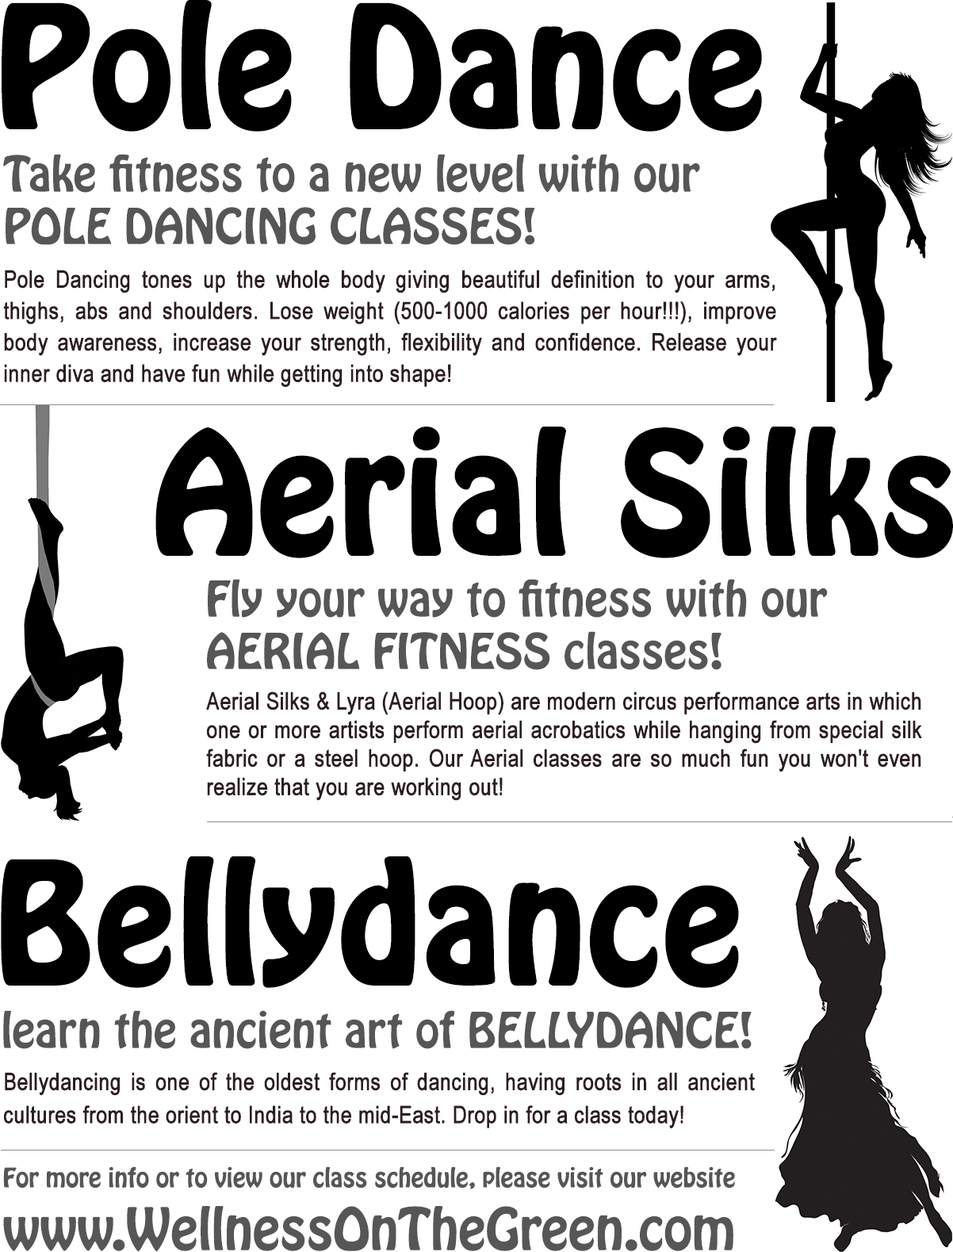
<style>
.page{position:relative;width:953px;height:1252px;background:#ffffff}
.page>*{position:absolute;margin:0}
.t1{font:146.6px "HoboStd";color:#000000;font-weight:bold}
.t2{font:43.6px "HoboStd";color:#565656}
.t3{font:23.8px/31.4px "ArialNarrow";color:#2c1d20;font-weight:bold}
.t4{font:23.8px "ArialNarrow";color:#2c1d20;font-weight:bold}
.t5{font:23.8px/33px "ArialNarrow";color:#2c1d20;font-weight:bold}
.t6{font:23.8px/39.6px "HoboStd";color:#565656}
.t7{font:51.5px/39.6px "HoboStd";color:#565656}
</style>
<div class="page">
<p class="t1" style="left:2px;top:0px;width:760px;height:132px">Pole Dance</p>
<p class="t2" style="left:3px;top:154px;width:697px;height:91px">Take fitness to a new level with our<br>POLE DANCING CLASSES!</p>
<p class="t3" style="left:3px;top:269px;width:774px;height:118px;text-align:justify">Pole Dancing tones up the whole body giving beautiful definition to your arms, thighs, abs and shoulders. Lose weight (500-1000 calories per hour!!!), improve body awareness, increase your strength, flexibility and confidence. Release your inner diva and have fun while getting into shape!</p>
<p class="t1" style="left:155px;top:426px;width:798px;height:132px">Aerial Silks</p>
<p class="t2" style="left:207px;top:579px;width:621px;height:91px">Fly your way to fitness with our<br>AERIAL FITNESS classes!</p>
<p class="t4" style="left:206px;top:691px;width:716px;height:110px;text-align:justify">Aerial Silks &amp; Lyra (Aerial Hoop) are modern circus performance arts in which one or more artists perform aerial acrobatics while hanging from special silk fabric or a steel hoop. Our Aerial classes are so much fun you won't even realize that you are working out!</p>
<p class="t1" style="left:1px;top:856px;width:738px;height:132px">Bellydance</p>
<p class="t2" style="left:3px;top:1010px;width:748px;height:39px">learn the ancient art of BELLYDANCE!</p>
<p class="t5" style="left:4px;top:1072px;width:751px;height:56px;text-align:justify">Bellydancing is one of the oldest forms of dancing, having roots in all ancient cultures from the orient to India to the mid-East. Drop in for a class today!</p>
<p class="t6" style="left:3px;top:1166px;width:732px;height:86px;text-align:center">For more info or to view our class schedule, please visit our website<br><span class="t7">www.WellnessOnTheGreen.com</span></p>
</div>
